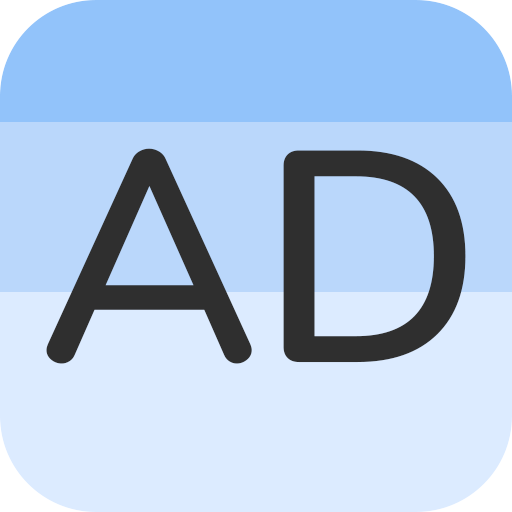
<style>
.page{position:relative;width:512px;height:512px;background:#dcebff}
.page>*{position:absolute;margin:0}
.t1{font:300px "Nunito-SemiBold";color:#2f2f2f}
</style>
<div class="page">
<p class="t1" style="left:46px;top:148px;width:420px;height:216px">AD</p>
</div>
